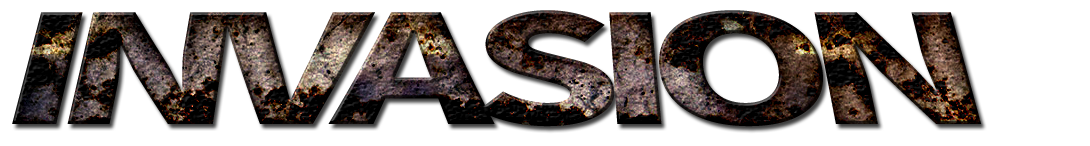
<style>
.page{position:relative;width:1090px;height:146px;background:#ffffff}
.page>*{position:absolute;margin:0}
.t1{font:150px "Keifont";letter-spacing:-0.1em;scale:1.6 1}
</style>
<div class="page">
<p class="t1" style="left:12px;top:10px;width:970px;height:117px">INVASION</p>
</div>
